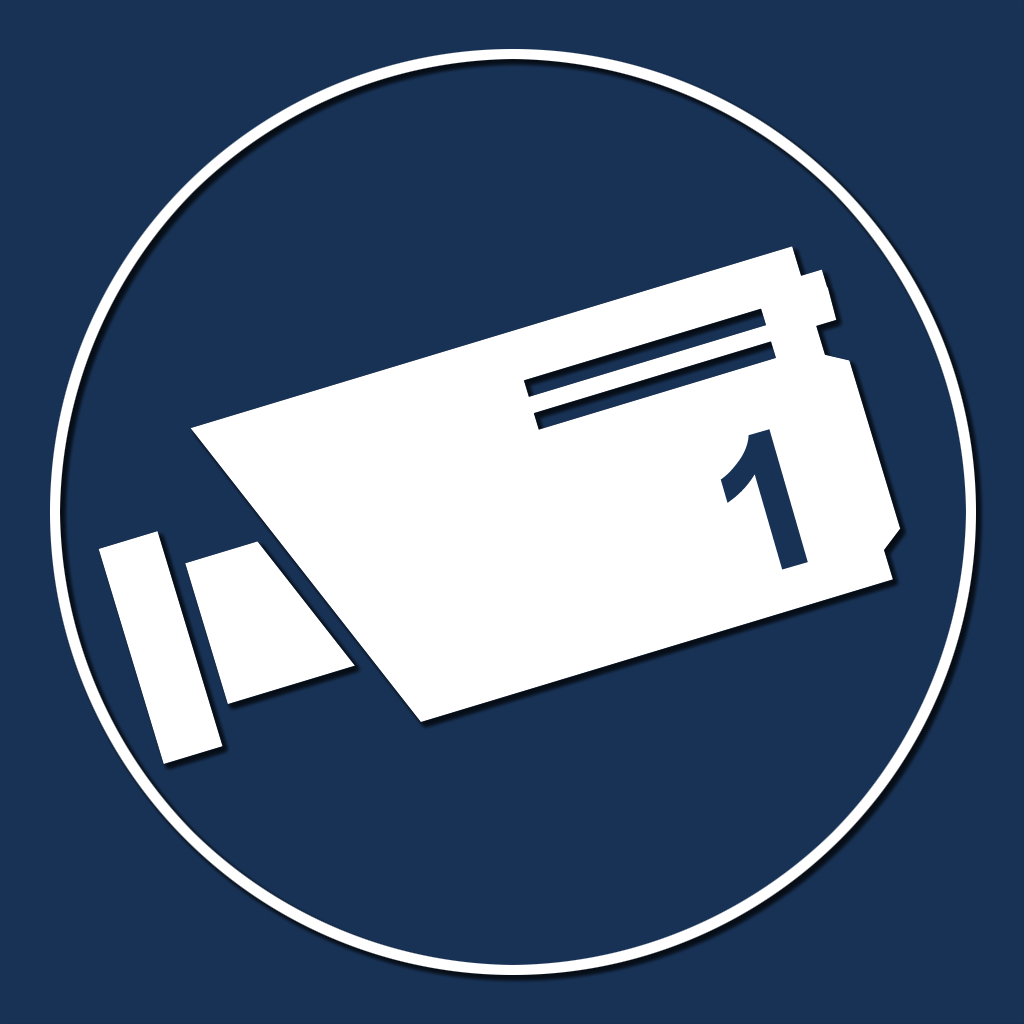
<style>
.page{position:relative;width:1024px;height:1024px;background:#183255}
.page>*{position:absolute;margin:0}
.t1{font:192px "Arial-BoldMT";letter-spacing:0.05em;color:#183255}
</style>
<div class="page">
<p class="t1" style="left:720px;top:429px;width:88px;height:141px;rotate:-16deg">1</p>
</div>
